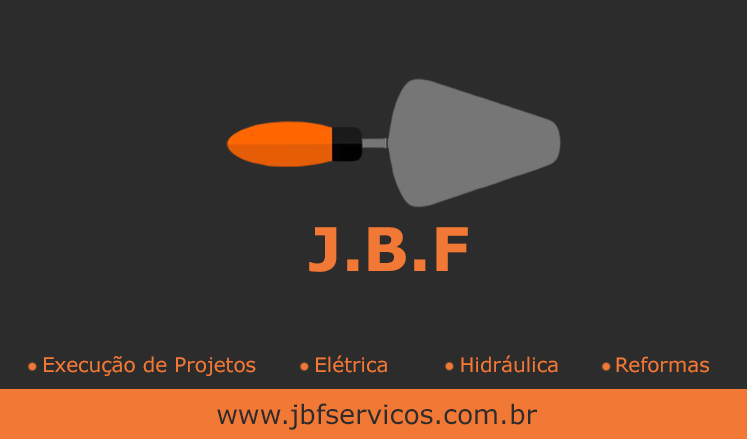
<style>
.page{position:relative;width:747px;height:439px;background:#2c2c2c}
.page>*{position:absolute;margin:0}
.t1{font:60px "Verdana-Bold";color:#f27935}
.t2{font:20.2px "Verdana";color:#f27935}
.t3{font:20px "Verdana";color:#f27935}
.t4{font:26.7px "Verdana";color:#2c2c2c}
</style>
<div class="page">
<p class="t1" style="left:309px;top:227px;width:159px;height:45px">J.B.F</p>
<p class="t2" style="left:44px;top:356px;width:212px;height:20px">Execução de Projetos</p>
<p class="t3" style="left:316px;top:355px;width:71px;height:18px">Elétrica</p>
<p class="t3" style="left:461px;top:355px;width:97px;height:18px">Hidráulica</p>
<p class="t3" style="left:616px;top:356px;width:93px;height:17px">Reformas</p>
<p class="t4" style="left:217px;top:403px;width:320px;height:27px">www.jbfservicos.com.br</p>
</div>
